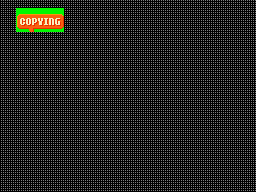
<style>
.page{position:relative;width:256px;height:192px;background:#000000}
.page>*{position:absolute;margin:0}
.t1{font:13.3px "ImpactfulBits";letter-spacing:-0.01em;color:#f8f0c0;text-transform:uppercase}
.t2{font:13.3px "ImpactfulBits";letter-spacing:-0.01em;text-transform:uppercase}
</style>
<div class="page">
<p class="t1" style="left:20px;top:18px;width:40px;height:7px">Copying</p>
<p class="t2" style="left:21px;top:19px;width:40px;height:7px">Copying</p>
</div>
